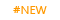
<style>
.page{position:relative;width:60px;height:20px;background:#ffffff}
.page>*{position:absolute;margin:0}
.t1{font:12px "Ebrima";color:#ff9900}
</style>
<div class="page">
<p class="t1" style="left:13px;top:6px;width:34px;height:8px">#NEW</p>
</div>
